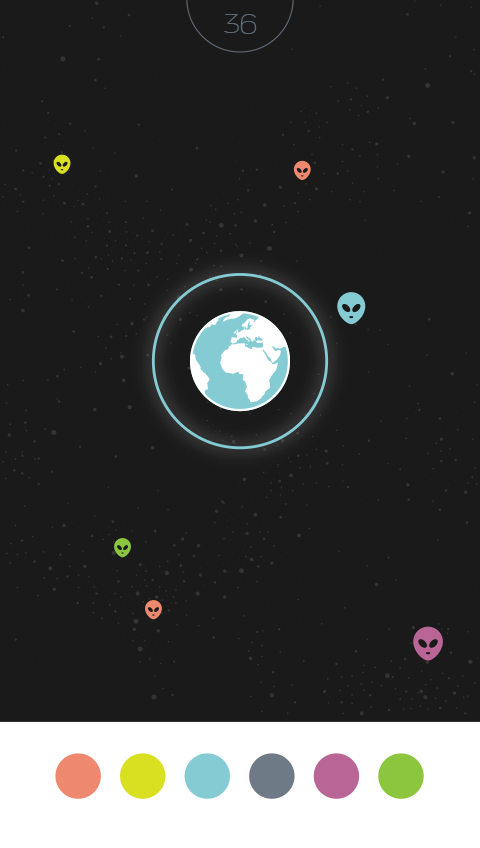
<style>
.page{position:relative;width:480px;height:848px;background:#1a1a1a}
.page>*{position:absolute;margin:0}
.t1{font:28px "CREW36";color:#5f6973}
</style>
<div class="page">
<p class="t1" style="left:224px;top:14px;width:33px;height:20px">36</p>
</div>
